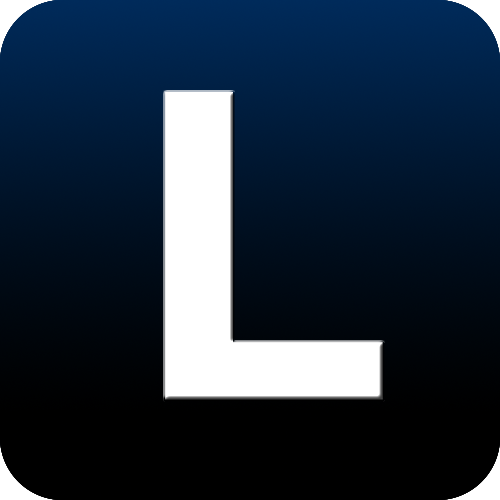
<style>
.page{position:relative;width:500px;height:500px}
.page>*{position:absolute;margin:0}
.t1{font:430px "HelveticaNeue-Bold";color:#ffffff}
</style>
<div class="page">
<p class="t1" style="left:165px;top:92px;width:218px;height:308px">L</p>
</div>
